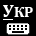
<style>
.page{position:relative;width:36px;height:36px;background:#000000}
.page>*{position:absolute;margin:0}
.t1{font:15px "Cambria-Bold";color:#ffffff}
.t2{font:18px "Cambria-Bold";color:#ffffff}
</style>
<div class="page">
<p class="t1" style="left:3px;top:5px;width:30px;height:12px"><span class="t2">У</span>КР</p>
</div>
